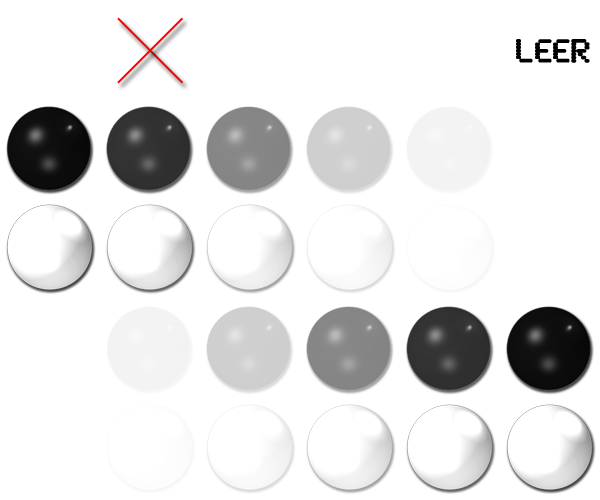
<style>
.page{position:relative;width:600px;height:500px;background:#ffffff}
.page>*{position:absolute;margin:0}
.t1{font:33.5px "Lowtech";color:#000000;font-weight:bold}
</style>
<div class="page">
<p class="t1" style="left:516px;top:39px;width:74px;height:24px">LEER</p>
</div>
